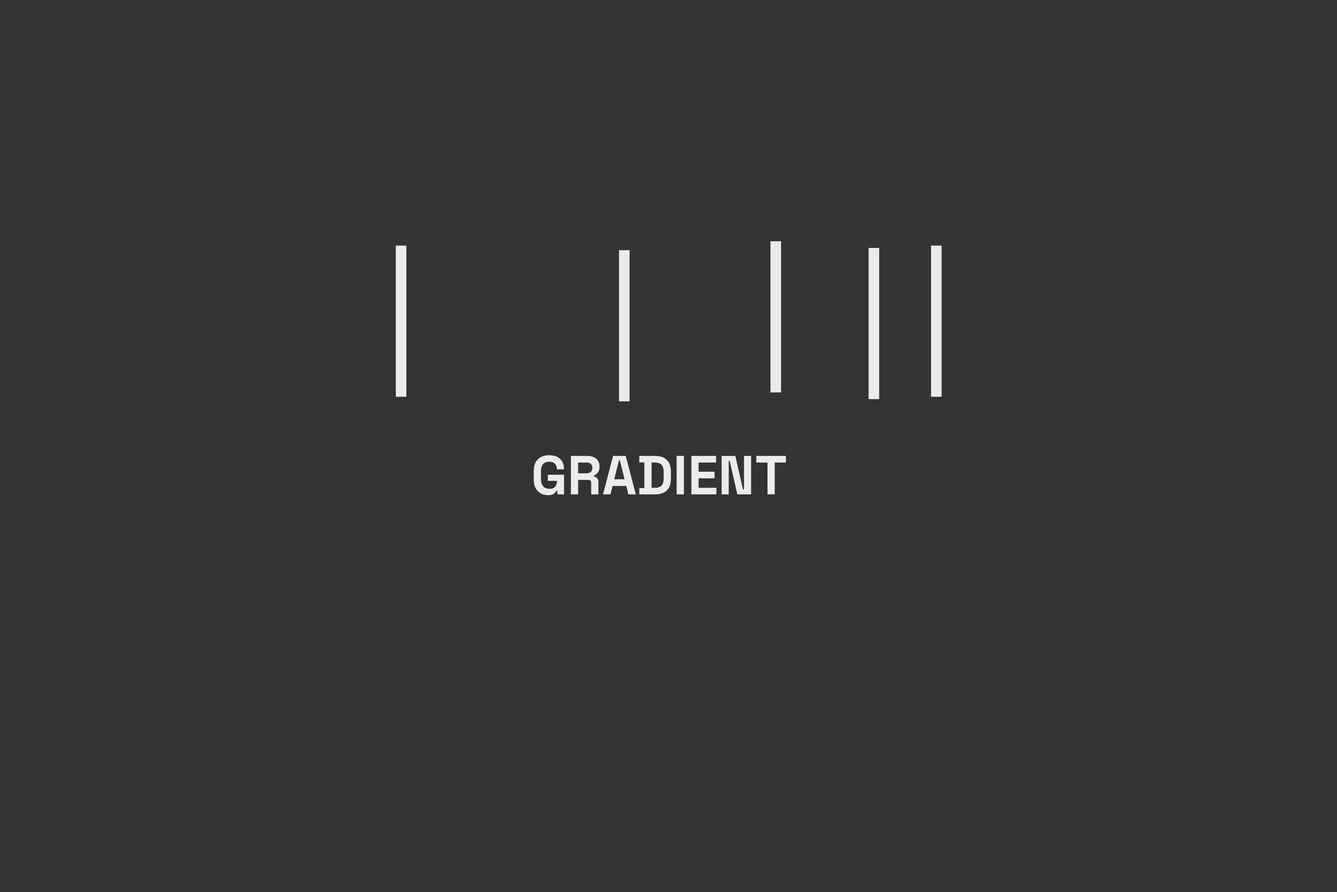
<style>
.page{position:relative;width:1337px;height:892px;background:#333333}
.page>*{position:absolute;margin:0}
.t1{font:54.9px "SpaceGroteskLight-Bold";color:#ebebeb}
</style>
<div class="page">
<p class="t1" style="left:534px;top:455px;width:252px;height:40px">GRADIENT</p>
</div>
